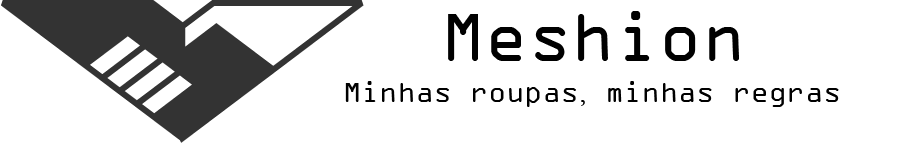
<style>
.page{position:relative;width:900px;height:143px;background:#ffffff}
.page>*{position:absolute;margin:0}
.t1{font:72px "OCRAExtended";color:#000000}
.t2{font:30px "OCRAExtended";color:#000000}
.t3{font:30px "Perpetua";color:#000000}
</style>
<div class="page">
<p class="t1" style="left:448px;top:11px;width:291px;height:50px">Meshion</p>
<p class="t2" style="left:345px;top:81px;width:494px;height:26px">Minhas roupas<span class="t3">,</span> minhas regras</p>
</div>
